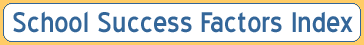
<style>
.page{position:relative;width:364px;height:45px;background:#ffffff}
.page>*{position:absolute;margin:0}
.t1{font:35.9px "BlueHighway";color:#336699}
</style>
<div class="page">
<p class="t1" style="left:13px;top:11px;width:340px;height:22px">School Success Factors Index</p>
</div>
